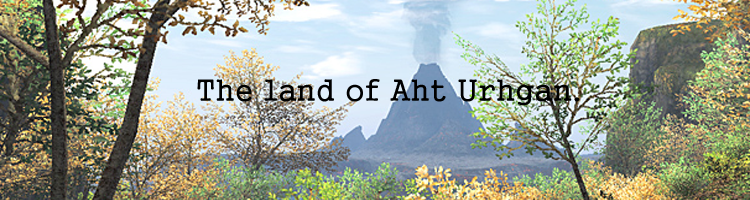
<style>
.page{position:relative;width:750px;height:200px}
.page>*{position:absolute;margin:0}
.t1{font:30px "Gungsuh";color:#000000}
</style>
<div class="page">
<p class="t1" style="left:197px;top:79px;width:383px;height:27px">The land of Aht Urhgan.</p>
</div>
